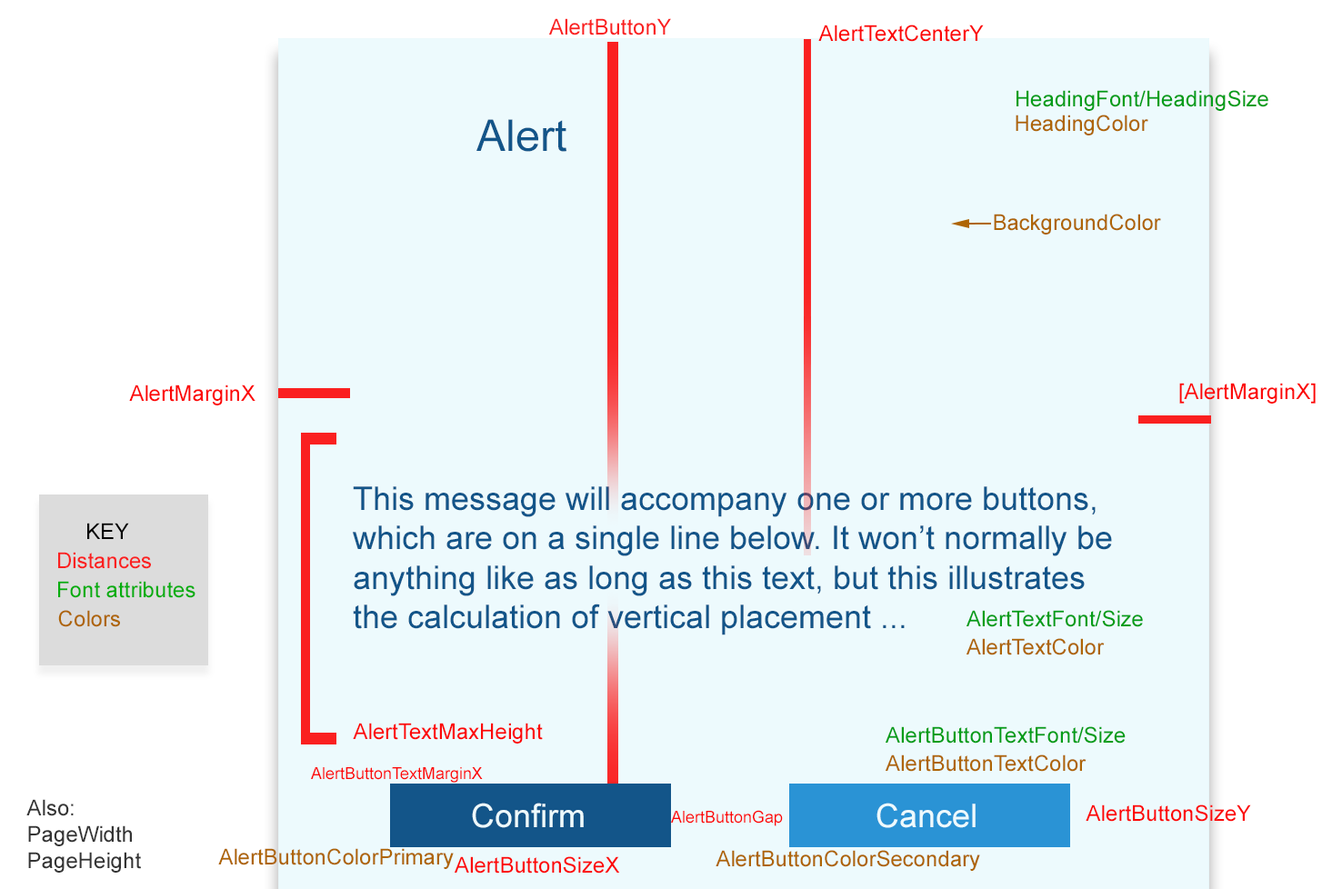
<style>
.page{position:relative;width:1342px;height:889px;background:#edfafd}
.page>*{position:absolute;margin:0}
.t1{font:21.8px "ArialMT";color:#fa2020}
.t2{font:21.8px "ArialMT";color:#fc0707}
.t3{font:21.8px "ArialMT";color:#039d18}
.t4{font:43.6px "ArialMT";color:#135589}
.t5{font:21.8px "ArialMT";color:#ae6505}
.t6{font:32.7px "ArialMT";color:#135589}
.t7{font:21.8px "ArialMT";color:#000000}
.t8{font:21.8px "ArialMT";color:#05ad0e}
.t9{font:16.4px "ArialMT";color:#fc0707}
.t10{font:21.8px "ArialMT";color:#343434}
.t11{font:32.7px "ArialMT";color:#edfafd}
</style>
<div class="page">
<p class="t1" style="left:549px;top:18px;width:122px;height:17px">AlertButtonY</p>
<p class="t2" style="left:818px;top:25px;width:165px;height:17px">AlertTextCenterY</p>
<p class="t3" style="left:1016px;top:90px;width:252px;height:21px">HeadingFont/HeadingSize</p>
<p class="t4" style="left:476px;top:119px;width:90px;height:33px">Alert</p>
<p class="t5" style="left:1015px;top:115px;width:133px;height:20px">HeadingColor</p>
<p class="t5" style="left:993px;top:214px;width:168px;height:20px">BackgroundColor</p>
<p class="t2" style="left:129px;top:384px;width:126px;height:21px">AlertMarginX</p>
<p class="t2" style="left:1179px;top:383px;width:136px;height:21px">[AlertMarginX]</p>
<p class="t6" style="left:353px;top:486px;width:759px;height:149px">This message will accompany one or more buttons, which are on a single line below. It won’t normally be anything like as long as this text, but this illustrates the calculation of vertical placement ...</p>
<p class="t7" style="left:87px;top:523px;width:42px;height:16px">KEY</p>
<p class="t1" style="left:58px;top:552px;width:93px;height:17px">Distances</p>
<p class="t8" style="left:58px;top:581px;width:137px;height:17px">Font attributes</p>
<p class="t5" style="left:58px;top:610px;width:62px;height:17px">Colors</p>
<p class="t3" style="left:966px;top:610px;width:176px;height:17px">AlertTextFont/Size</p>
<p class="t5" style="left:966px;top:638px;width:138px;height:17px">AlertTextColor</p>
<p class="t2" style="left:353px;top:723px;width:190px;height:20px">AlertTextMaxHeight</p>
<p class="t3" style="left:885px;top:726px;width:240px;height:17px">AlertButtonTextFont/Size</p>
<p class="t5" style="left:885px;top:754px;width:201px;height:18px">AlertButtonTextColor</p>
<p class="t9" style="left:311px;top:767px;width:172px;height:16px">AlertButtonTextMarginX</p>
<p class="t10" style="left:26px;top:799px;width:115px;height:74px">Also:<br>PageWidth<br>PageHeight</p>
<p class="t11" style="left:472px;top:803px;width:111px;height:25px">Confirm</p>
<p class="t9" style="left:671px;top:810px;width:112px;height:16px">AlertButtonGap</p>
<p class="t11" style="left:876px;top:803px;width:99px;height:25px">Cancel</p>
<p class="t2" style="left:1085px;top:804px;width:166px;height:18px">AlertButtonSizeY</p>
<p class="t5" style="left:218px;top:848px;width:236px;height:21px">AlertButtonColorPrimary</p>
<p class="t2" style="left:454px;top:856px;width:166px;height:17px">AlertButtonSizeX</p>
<p class="t5" style="left:715px;top:850px;width:265px;height:21px">AlertButtonColorSecondary</p>
</div>
